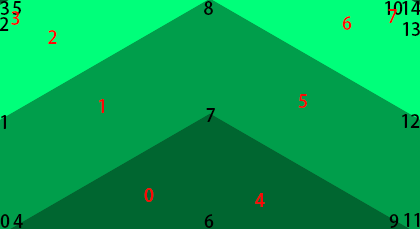
<style>
.page{position:relative;width:420px;height:229px;background:#009e4b}
.page>*{position:absolute;margin:0}
.t1{font:18px "AdobeHeitiStd-Regular";color:#000000}
.t2{font:18px "AdobeHeitiStd-Regular";color:#fe0505}
</style>
<div class="page">
<p class="t1" style="left:0px;top:1px;width:9px;height:14px">3</p>
<p class="t1" style="left:12px;top:1px;width:9px;height:14px">5</p>
<p class="t1" style="left:204px;top:1px;width:9px;height:14px">8</p>
<p class="t1" style="left:385px;top:1px;width:18px;height:14px">10</p>
<p class="t1" style="left:402px;top:1px;width:19px;height:14px">14</p>
<p class="t1" style="left:0px;top:17px;width:9px;height:14px">2</p>
<p class="t2" style="left:11px;top:11px;width:9px;height:14px">3</p>
<p class="t2" style="left:342px;top:16px;width:10px;height:14px">6</p>
<p class="t2" style="left:388px;top:9px;width:9px;height:14px">7</p>
<p class="t2" style="left:48px;top:30px;width:9px;height:14px">2</p>
<p class="t1" style="left:403px;top:22px;width:17px;height:14px">13</p>
<p class="t2" style="left:99px;top:99px;width:5px;height:14px">1</p>
<p class="t2" style="left:298px;top:94px;width:9px;height:14px">5</p>
<p class="t1" style="left:206px;top:108px;width:9px;height:14px">7</p>
<p class="t1" style="left:1px;top:115px;width:5px;height:14px">1</p>
<p class="t1" style="left:402px;top:114px;width:18px;height:14px">12</p>
<p class="t2" style="left:144px;top:188px;width:10px;height:14px">0</p>
<p class="t2" style="left:255px;top:193px;width:10px;height:14px">4</p>
<p class="t1" style="left:0px;top:214px;width:10px;height:14px">0</p>
<p class="t1" style="left:13px;top:214px;width:10px;height:14px">4</p>
<p class="t1" style="left:204px;top:214px;width:10px;height:14px">6</p>
<p class="t1" style="left:389px;top:214px;width:10px;height:14px">9</p>
<p class="t1" style="left:404px;top:213px;width:16px;height:14px">11</p>
</div>
